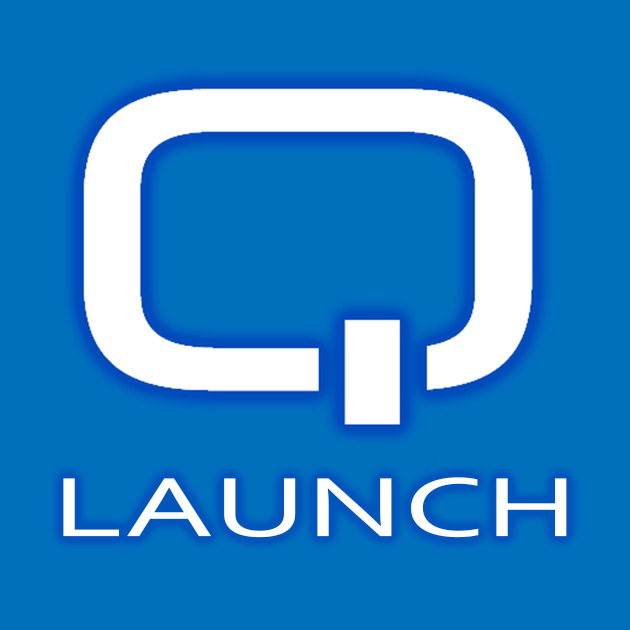
<style>
.page{position:relative;width:630px;height:630px;background:#0070bc}
.page>*{position:absolute;margin:0}
.t1{font:87.6px "Corbel";color:#ffffff;scale:1.59 1}
</style>
<div class="page">
<p class="t1" style="left:63px;top:477px;width:504px;height:61px">LAUNCH</p>
</div>
